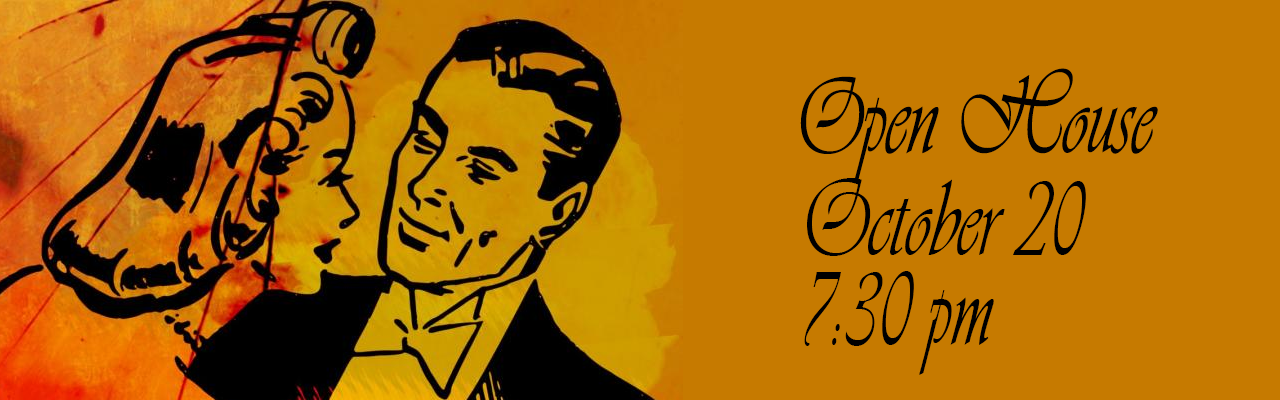
<style>
.page{position:relative;width:1280px;height:400px;background:#c67a00}
.page>*{position:absolute;margin:0}
.t1{font:112.5px "Vivaldii";color:#010101;scale:0.67 1}
.t2{font:112.5px "Vivaldii";color:#000000;scale:0.67 1}
</style>
<div class="page">
<p class="t1" style="left:800px;top:68px;width:358px;height:115px">Open House</p>
<p class="t2" style="left:804px;top:178px;width:282px;height:197px">October 20<br>7:30 pm</p>
</div>
